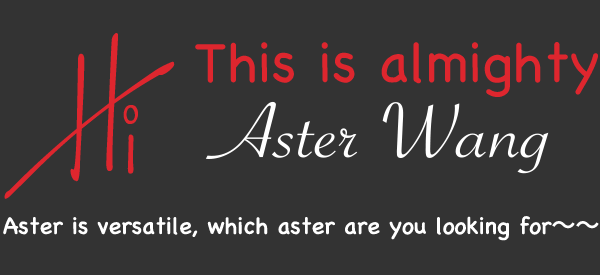
<style>
.page{position:relative;width:600px;height:275px;background:#333333}
.page>*{position:absolute;margin:0}
.t1{font:198.3px "MissLankfort";color:#de262e;scale:0.79 1}
.t2{font:56.4px "ChalkboardSE-Light";color:#de262e}
.t3{font:83.6px "SavoyeLetPlain";color:#ffffff;scale:1.21 1}
.t4{font:24px "ChalkboardSE-Regular";color:#ffffff}
.t5{font:24px "AdobeHeitiStd-Regular";color:#ffffff}
</style>
<div class="page">
<p class="t1" style="left:4px;top:33px;width:171px;height:166px">Hi</p>
<p class="t2" style="left:195px;top:42px;width:403px;height:55px">This is almighty</p>
<p class="t3" style="left:205px;top:101px;width:344px;height:73px">Aster Wang</p>
<p class="t4" style="left:3px;top:216px;width:596px;height:25px">Aster is versatile, which aster are you looking for<span class="t5">～～</span></p>
</div>
